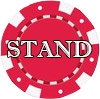
<style>
.page{position:relative;width:100px;height:99px;background:#ffffff}
.page>*{position:absolute;margin:0}
.t1{font:22.9px "ImprintMT-Shadow";color:#ffffff}
</style>
<div class="page">
<p class="t1" style="left:7px;top:41px;width:85px;height:17px">STAND</p>
</div>
